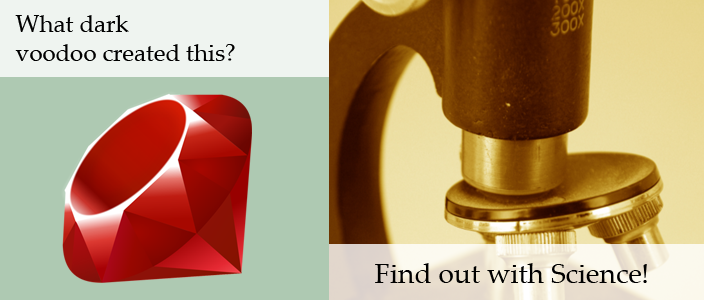
<style>
.page{position:relative;width:704px;height:300px;background:#aec9b2}
.page>*{position:absolute;margin:0}
.t1{font:24px "PalatinoLinotype-Roman";color:#000000}
.t2{font:28px "PalatinoLinotype-Roman";color:#000000}
</style>
<div class="page">
<p class="t1" style="left:15px;top:15px;width:220px;height:46px">What dark<br>voodoo created this?</p>
<p class="t2" style="left:375px;top:263px;width:272px;height:20px">Find out with Science!</p>
</div>
